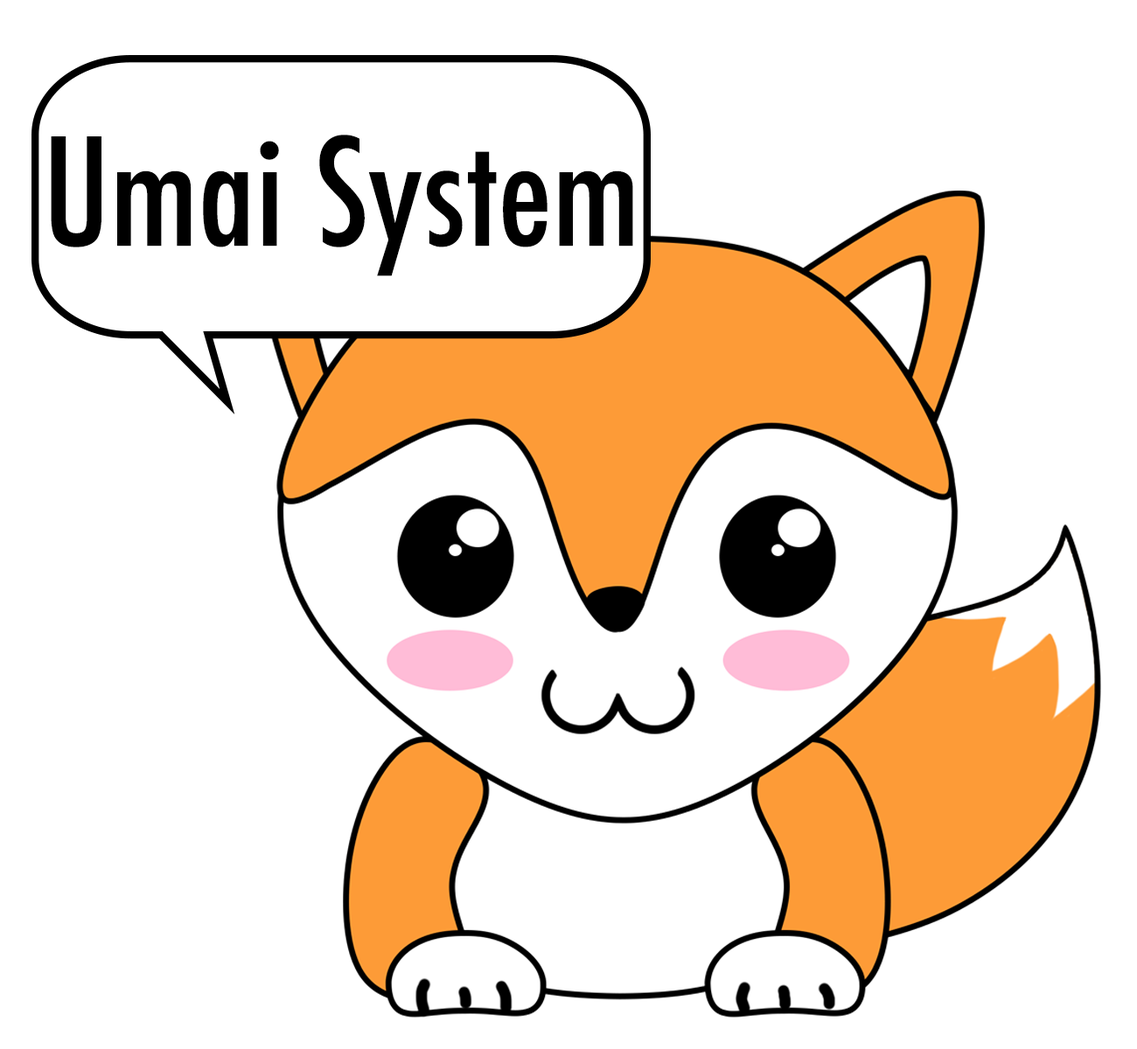
<style>
.page{position:relative;width:1137px;height:1049px;background:#ffffff}
.page>*{position:absolute;margin:0}
.t1{font:145px "Futura-CondensedMedium";color:#000000}
</style>
<div class="page">
<p class="t1" style="left:51px;top:135px;width:582px;height:141px">Umai System</p>
</div>
